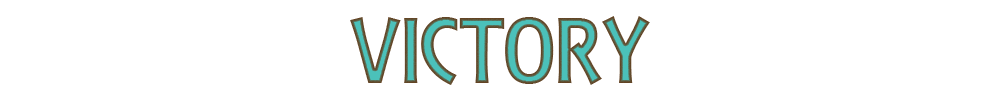
<style>
.page{position:relative;width:1000px;height:100px;background:#ffffff}
.page>*{position:absolute;margin:0}
.t1{font:100px "ARESSENCE"}
</style>
<div class="page">
<p class="t1" style="left:350px;top:16px;width:300px;height:69px">VICTORY</p>
</div>
